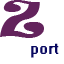
<style>
.page{position:relative;width:64px;height:64px;background:#ffffff}
.page>*{position:absolute;margin:0}
.t1{font:48px "Ravie";color:#63235c}
.t2{font:18px "System";color:#080860}
</style>
<div class="page">
<p class="t1" style="left:0px;top:0px;width:44px;height:38px">Z</p>
<p class="t2" style="left:31px;top:43px;width:28px;height:15px">port</p>
</div>
